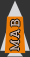
<style>
.page{position:relative;width:30px;height:57px;background:#333333}
.page>*{position:absolute;margin:0}
.t1{font:12.4px "ZillaSlab-Regular";letter-spacing:0.2em;color:#dcc3b5;scale:1.03 1}
</style>
<div class="page">
<p class="t1" style="left:10px;top:19px;width:10px;height:32px;rotate:-89deg">MAB</p>
</div>
